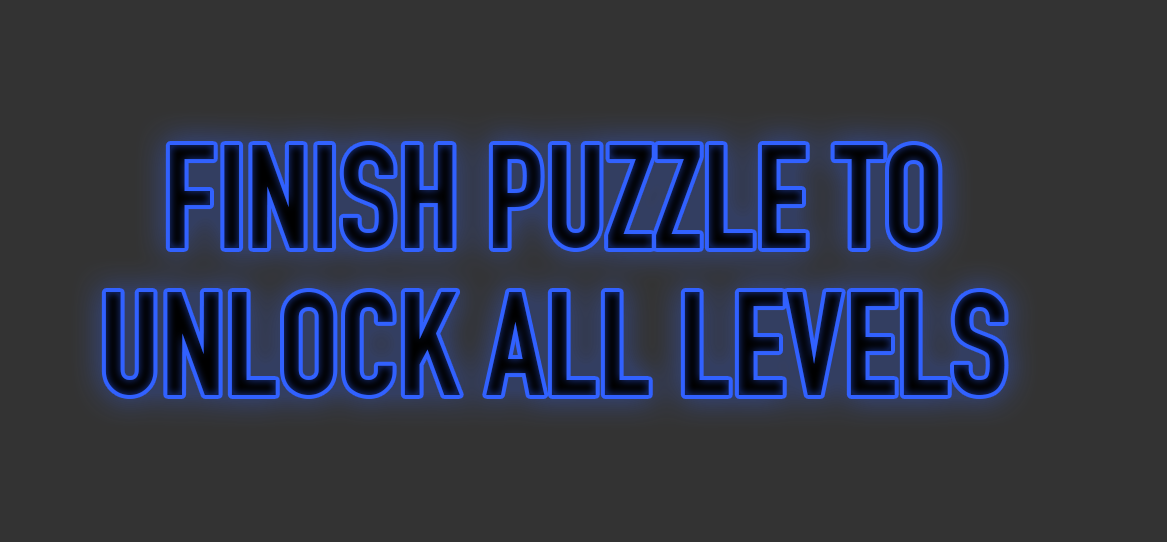
<style>
.page{position:relative;width:1167px;height:542px;background:#333333}
.page>*{position:absolute;margin:0}
.t1{font:144px/146.6px "DINEngschrift";text-transform:uppercase}
</style>
<div class="page">
<p class="t1" style="left:105px;top:145px;width:900px;height:250px;text-align:center">finish puzzle to unlock all levels</p>
</div>
